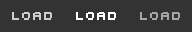
<style>
.page{position:relative;width:192px;height:32px;background:#333333}
.page>*{position:absolute;margin:0}
.t1{font:12.7px "Uni0554";color:#cdcdcd}
.t2{font:12.7px "Uni0554";color:#ffffff}
.t3{font:12.7px "Uni0554";color:#a5a5a5}
</style>
<div class="page">
<p class="t1" style="left:12px;top:12px;width:40px;height:8px">LOAD</p>
<p class="t2" style="left:76px;top:12px;width:40px;height:8px">LOAD</p>
<p class="t3" style="left:140px;top:12px;width:40px;height:8px">LOAD</p>
</div>
